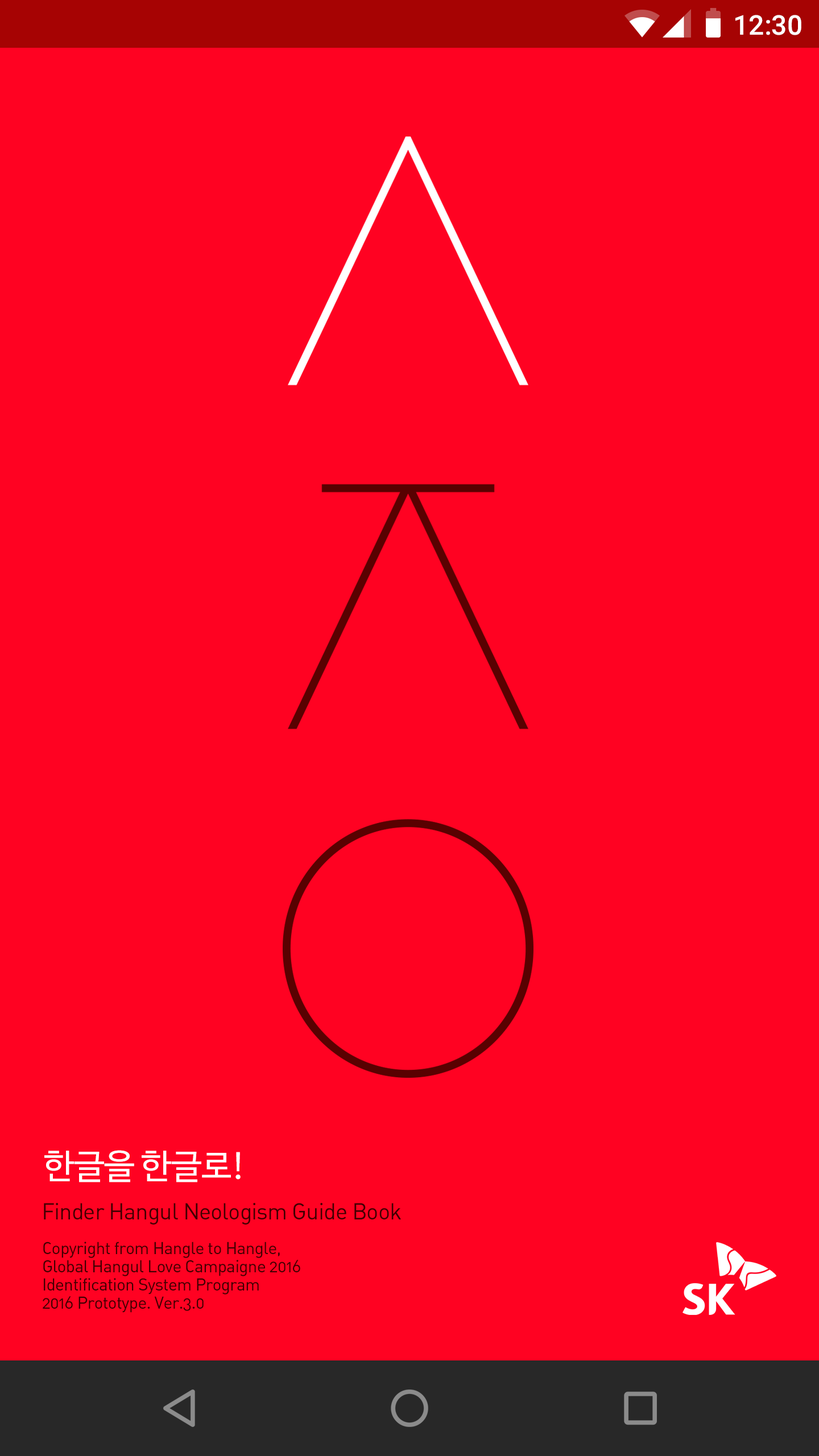
<style>
.page{position:relative;width:819px;height:1456px;background:#ff0222}
.page>*{position:absolute;margin:0}
.t1{font:27.3px "Roboto-Medium";color:#ffffff}
.t2{font:34.1px "NanumBarunGothic";letter-spacing:-0.01em;color:#ffffff}
.t3{font:22.7px "DINAlternate-Regular";letter-spacing:-0.025em;color:#400002}
.t4{font:17.1px/18.2px "DINAlternate-Regular";letter-spacing:-0.025em;color:#400002}
</style>
<div class="page">
<p class="t1" style="left:735px;top:15px;width:66px;height:20px">12:30</p>
<p class="t2" style="left:44px;top:1150px;width:197px;height:32px">한글을 한글로!</p>
<p class="t3" style="left:44px;top:1203px;width:357px;height:22px">Finder Hangul Neologism Guide Book</p>
<p class="t4" style="left:43px;top:1242px;width:257px;height:71px">Copyright from Hangle to Hangle,<br>Global Hangul Love Campaigne 2016<br>Identification System Program <br>2016 Prototype. Ver.3.0</p>
</div>
